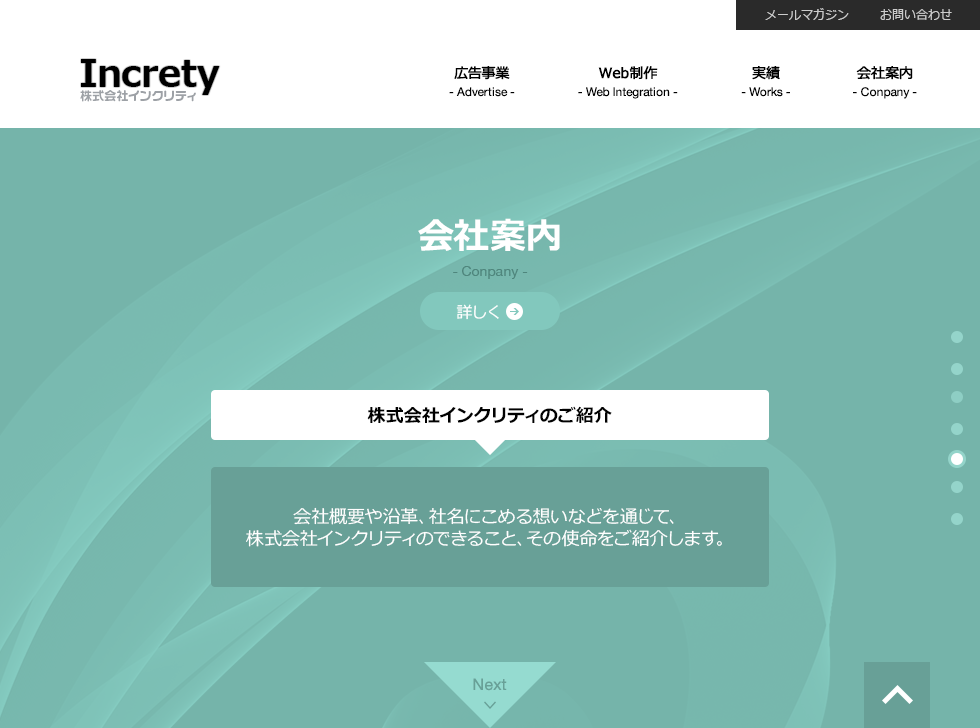
<style>
.page{position:relative;width:980px;height:728px;background:#75b4aa}
.page>*{position:absolute;margin:0}
.t1{font:12px "Meiryo";color:#cccccc}
.t2{font:36.6px "Meiryo-Bold";color:#000000}
.t3{font:14px "Meiryo";color:#000000;font-weight:bold}
.t4{font:12px "HelveticaNeue";color:#000000}
.t5{font:12px "VD-LogoMaru-Extra-G";color:#9da1a6}
.t6{font:36px "Meiryo-Bold";color:#ffffff}
.t7{font:14px "HelveticaNeue";color:#4f867d}
.t8{font:16px "Meiryo";color:#ffffff}
.t9{font:18px "Meiryo-Bold";color:#010101}
.t10{font:18px/22px "Meiryo";color:#ffffff}
.t11{font:16px "HelveticaNeue";color:#68a097}
</style>
<div class="page">
<p class="t1" style="left:765px;top:8px;width:84px;height:12px">メールマガジン</p>
<p class="t1" style="left:880px;top:9px;width:72px;height:11px">お問い合わせ</p>
<p class="t2" style="left:81px;top:59px;width:139px;height:36px">Increty</p>
<p class="t3" style="left:454px;top:66px;width:56px;height:14px">広告事業</p>
<p class="t3" style="left:598px;top:66px;width:60px;height:14px">Web制作</p>
<p class="t3" style="left:752px;top:66px;width:28px;height:14px">実績</p>
<p class="t3" style="left:856px;top:66px;width:57px;height:14px">会社案内</p>
<p class="t4" style="left:449px;top:87px;width:66px;height:10px">- Advertise -</p>
<p class="t4" style="left:578px;top:87px;width:100px;height:12px">- Web Integration -</p>
<p class="t4" style="left:741px;top:87px;width:49px;height:10px">- Works -</p>
<p class="t4" style="left:853px;top:87px;width:64px;height:12px">- Conpany -</p>
<p class="t5" style="left:80px;top:90px;width:116px;height:12px">株式会社インクリティ</p>
<p class="t6" style="left:418px;top:218px;width:142px;height:33px">会社案内</p>
<p class="t7" style="left:453px;top:266px;width:75px;height:13px">- Conpany -</p>
<p class="t8" style="left:456px;top:304px;width:43px;height:16px">詳しく</p>
<p class="t9" style="left:367px;top:406px;width:245px;height:17px">株式会社インクリティのご紹介</p>
<p class="t10" style="left:246px;top:507px;width:476px;height:40px;text-align:center">会社概要や沿革、社名にこめる想いなどを通じて、<br>株式会社インクリティのできること、その使命をご紹介します。</p>
<p class="t11" style="left:473px;top:678px;width:34px;height:13px">Next</p>
</div>
